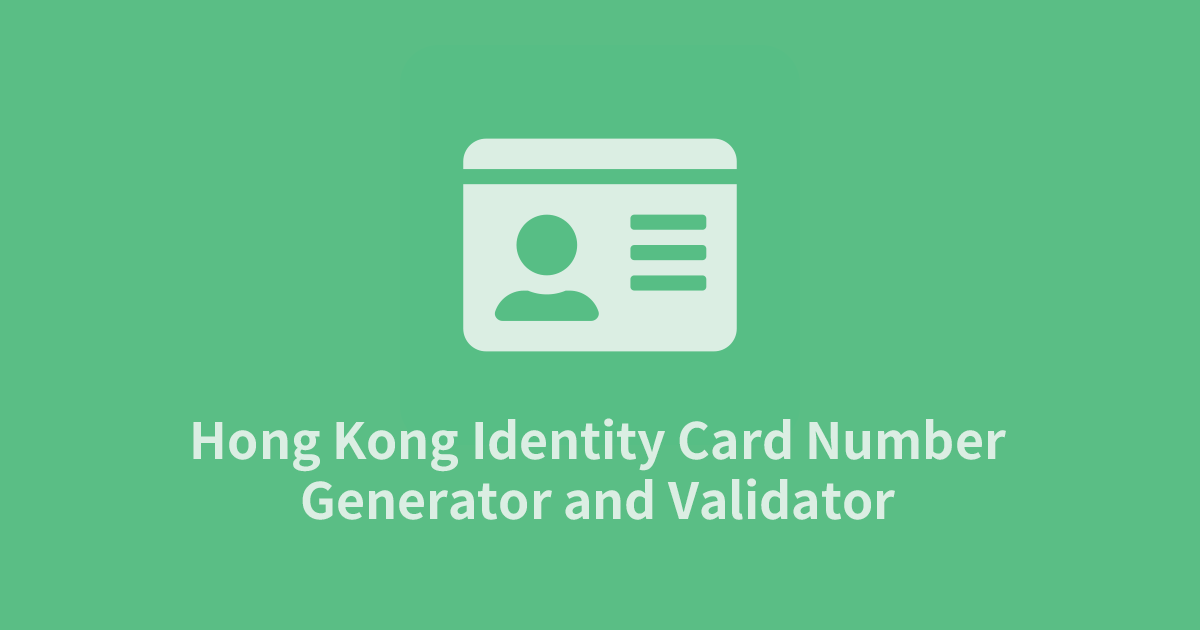
<style>
.page{position:relative;width:1200px;height:630px;background:#5abe85}
.page>*{position:absolute;margin:0}
.t1{font:50px "GenYoGothicTW-Bold-TTF";color:#dbeee3}
</style>
<div class="page">
<p class="t1" style="left:193px;top:418px;width:813px;height:102px;text-align:center">Hong Kong Identity Card Number<br>Generator and Validator</p>
</div>
